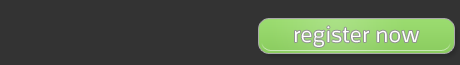
<style>
.page{position:relative;width:460px;height:65px;background:#333333}
.page>*{position:absolute;margin:0}
.t1{font:24px "MrJones-Book";color:#ffffff}
</style>
<div class="page">
<p class="t1" style="left:295px;top:26px;width:124px;height:21px">register now</p>
</div>
